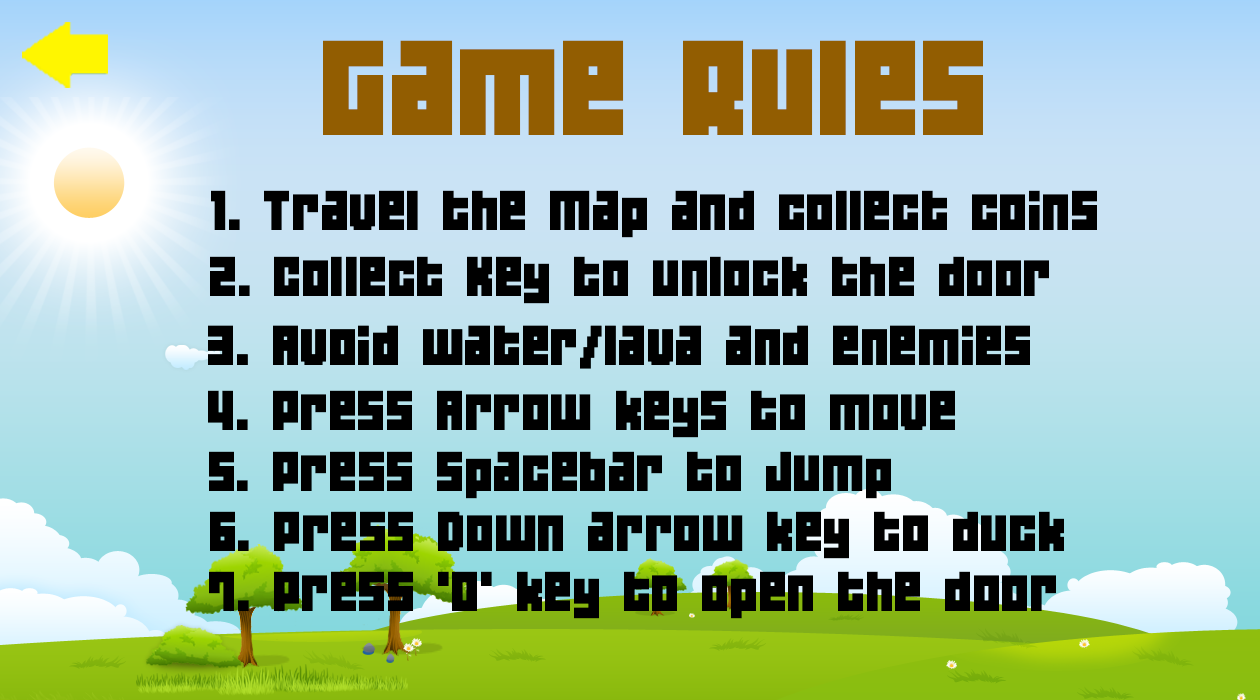
<style>
.page{position:relative;width:1260px;height:700px}
.page>*{position:absolute;margin:0}
.t1{font:120px "04b19";color:#925d01}
.t2{font:50px "04b19";color:#000000}
</style>
<div class="page">
<p class="t1" style="left:323px;top:40px;width:660px;height:95px">Game Rules</p>
<p class="t2" style="left:211px;top:190px;width:886px;height:48px">1. Travel the Map and collect coins</p>
<p class="t2" style="left:210px;top:256px;width:839px;height:48px">2. Collect Key to unlock the door</p>
<p class="t2" style="left:208px;top:325px;width:822px;height:44px">3. Avoid water/lava and enemies</p>
<p class="t2" style="left:208px;top:325px;width:822px;height:44px">3. Avoid water/lava and enemies</p>
<p class="t2" style="left:208px;top:390px;width:747px;height:48px">4. Press Arrow keys to move</p>
<p class="t2" style="left:209px;top:451px;width:682px;height:48px">5. Press spacebar to Jump</p>
<p class="t2" style="left:210px;top:511px;width:854px;height:48px">6. Press Down arrow key to duck</p>
<p class="t2" style="left:209px;top:571px;width:847px;height:48px">7. Press 'O' key to open the door</p>
</div>
